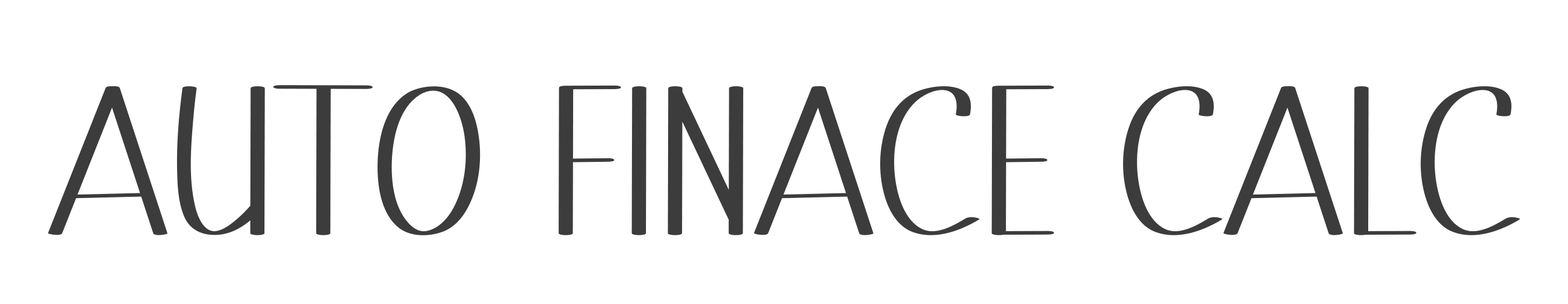
<style>
.page{position:relative;width:1568px;height:304px;background:#ffffff}
.page>*{position:absolute;margin:0}
.t1{font:310.7px "MinimalistRegular";color:#3c3c3c}
</style>
<div class="page">
<p class="t1" style="left:48px;top:85px;width:1472px;height:150px">Auto FinAce CAlc</p>
</div>
